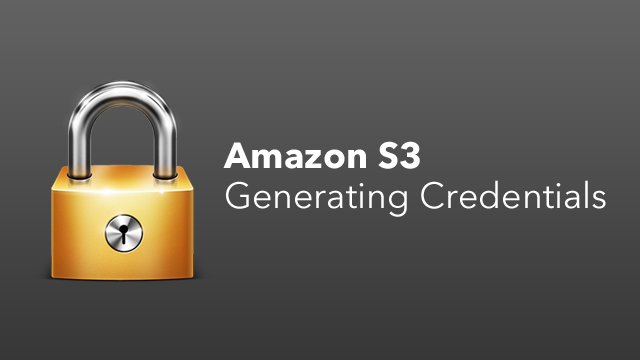
<style>
.page{position:relative;width:640px;height:360px}
.page>*{position:absolute;margin:0}
.t1{font:36px/40px "AvenirNext-Regular";letter-spacing:0.01em;color:#ffffff}
.t2{font:36px/40px "AvenirNext-Bold";letter-spacing:0.01em;color:#ffffff}
</style>
<div class="page">
<p class="t1" style="left:223px;top:141px;width:383px;height:76px"><span class="t2">Amazon S3<br></span>Generating Credentials</p>
</div>
